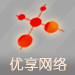
<style>
.page{position:relative;width:75px;height:75px}
.page>*{position:absolute;margin:0}
.t1{font:14px "YouYuan";color:#fce7d2;font-weight:bold}
</style>
<div class="page">
<p class="t1" style="left:9px;top:57px;width:58px;height:14px">优享网络</p>
</div>
